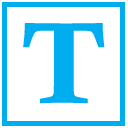
<style>
.page{position:relative;width:128px;height:128px;background:#ffffff}
.page>*{position:absolute;margin:0}
.t1{font:115.7px "CalisMTBol";color:#00aeef;scale:1.12 1}
</style>
<div class="page">
<p class="t1" style="left:23px;top:23px;width:82px;height:81px">T</p>
</div>
